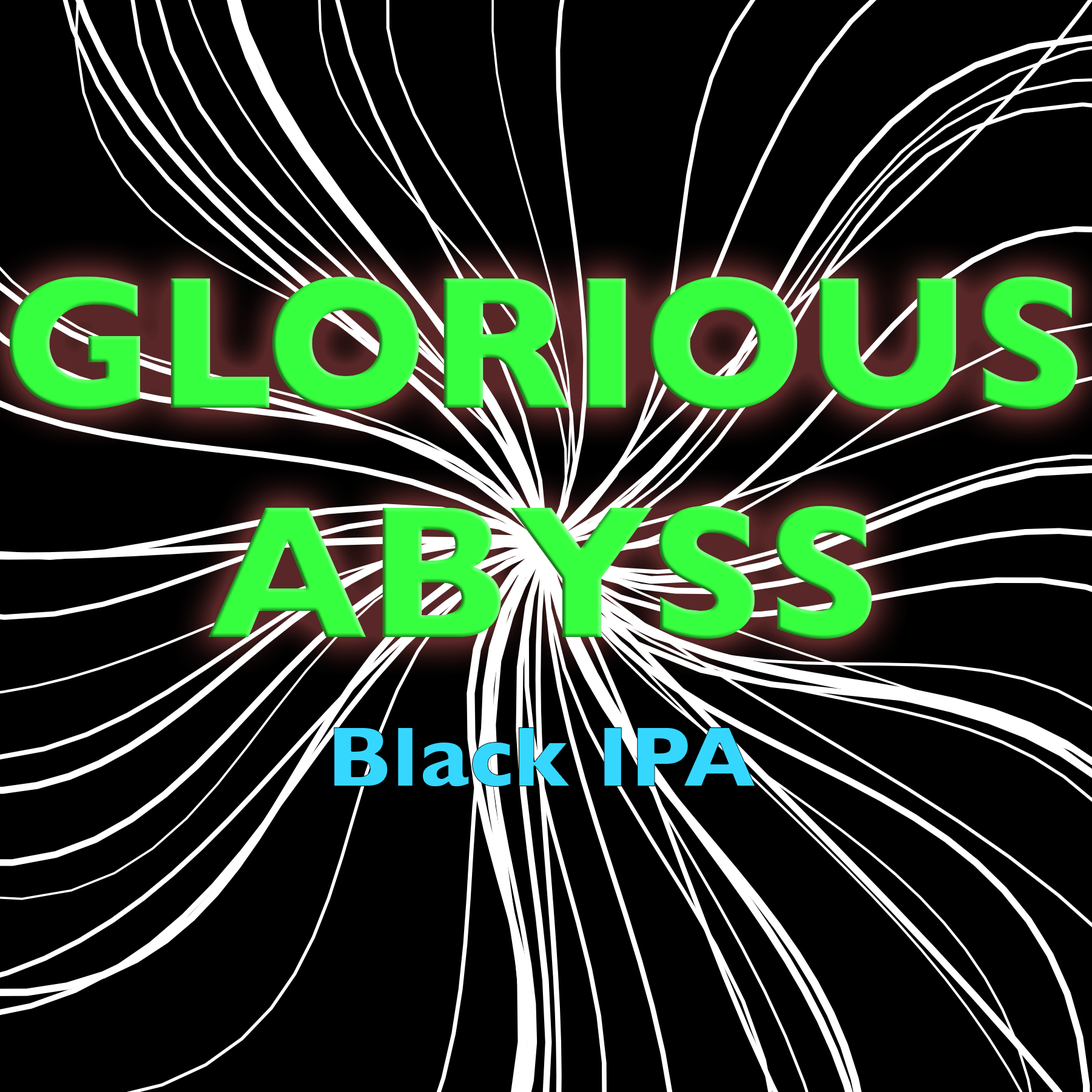
<style>
.page{position:relative;width:1092px;height:1092px;background:#000000}
.page>*{position:absolute;margin:0}
.t1{font:191.2px "GillSans-Bold";color:#36ff3f}
.t2{font:87.6px "GillSans-Bold";color:#36d7ff}
</style>
<div class="page">
<p class="t1" style="left:9px;top:277px;width:1068px;height:362px;text-align:center">GLORIOUS<br>ABYSS</p>
<p class="t2" style="left:334px;top:727px;width:422px;height:60px">Black IPA</p>
</div>
